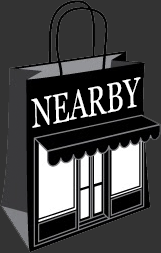
<style>
.page{position:relative;width:161px;height:253px;background:#333333}
.page>*{position:absolute;margin:0}
.t1{font:41.2px "Georgia";color:#ffffff;scale:0.66 1}
</style>
<div class="page">
<p class="t1" style="left:31px;top:77px;width:110px;height:51px;rotate:-11deg">NEARBY</p>
</div>
